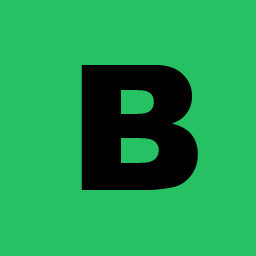
<style>
.page{position:relative;width:256px;height:256px;background:#25c163}
.page>*{position:absolute;margin:0}
.t1{font:174.7px "Arial-Black";color:#010101}
</style>
<div class="page">
<p class="t1" style="left:81px;top:65px;width:117px;height:125px">B</p>
</div>
